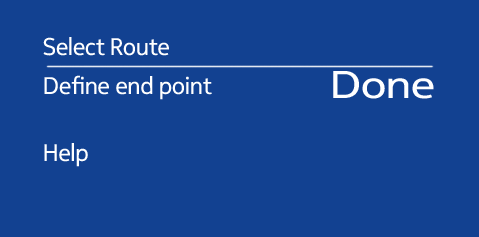
<style>
.page{position:relative;width:479px;height:237px;background:#124191}
.page>*{position:absolute;margin:0}
.t1{font:24px "NokiaPureHeadline-Regular";color:#ffffff}
.t2{font:24px "NokiaPureHeadline-Regular";letter-spacing:0.005em;color:#ffffff}
.t3{font:38.5px "NokiaPureHeadline-Regular";color:#ffffff;scale:1.22 1}
</style>
<div class="page">
<p class="t1" style="left:43px;top:37px;width:126px;height:19px">Select Route</p>
<p class="t2" style="left:44px;top:75px;width:168px;height:25px">Define end point</p>
<p class="t3" style="left:333px;top:71px;width:101px;height:28px">Done</p>
<p class="t1" style="left:44px;top:143px;width:44px;height:24px">Help</p>
</div>
